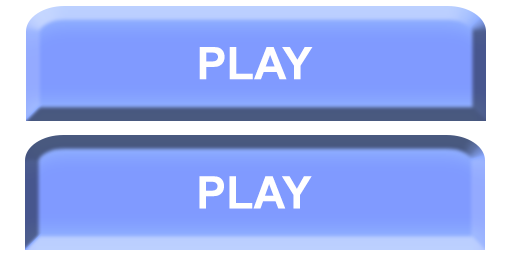
<style>
.page{position:relative;width:512px;height:256px;background:#809aff}
.page>*{position:absolute;margin:0}
.t1{font:45px "Arial-BoldMT";color:#fffefe}
.t2{font:45px "Arial-BoldMT";color:#ffffff}
</style>
<div class="page">
<p class="t1" style="left:199px;top:47px;width:114px;height:33px">PLAY</p>
<p class="t2" style="left:199px;top:176px;width:113px;height:33px">PLAY</p>
</div>
